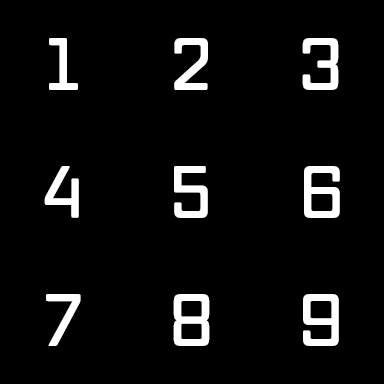
<style>
.page{position:relative;width:384px;height:384px;background:#000000}
.page>*{position:absolute;margin:0}
.t1{font:72px "VoxRound-Semibold";color:#ffffff}
</style>
<div class="page">
<p class="t1" style="left:49px;top:38px;width:29px;height:52px">1</p>
<p class="t1" style="left:174px;top:38px;width:34px;height:52px">2</p>
<p class="t1" style="left:302px;top:38px;width:37px;height:52px">3</p>
<p class="t1" style="left:44px;top:166px;width:35px;height:52px">4</p>
<p class="t1" style="left:174px;top:166px;width:34px;height:52px">5</p>
<p class="t1" style="left:304px;top:166px;width:36px;height:52px">6</p>
<p class="t1" style="left:46px;top:294px;width:35px;height:52px">7</p>
<p class="t1" style="left:173px;top:294px;width:37px;height:52px">8</p>
<p class="t1" style="left:303px;top:294px;width:36px;height:52px">9</p>
</div>
